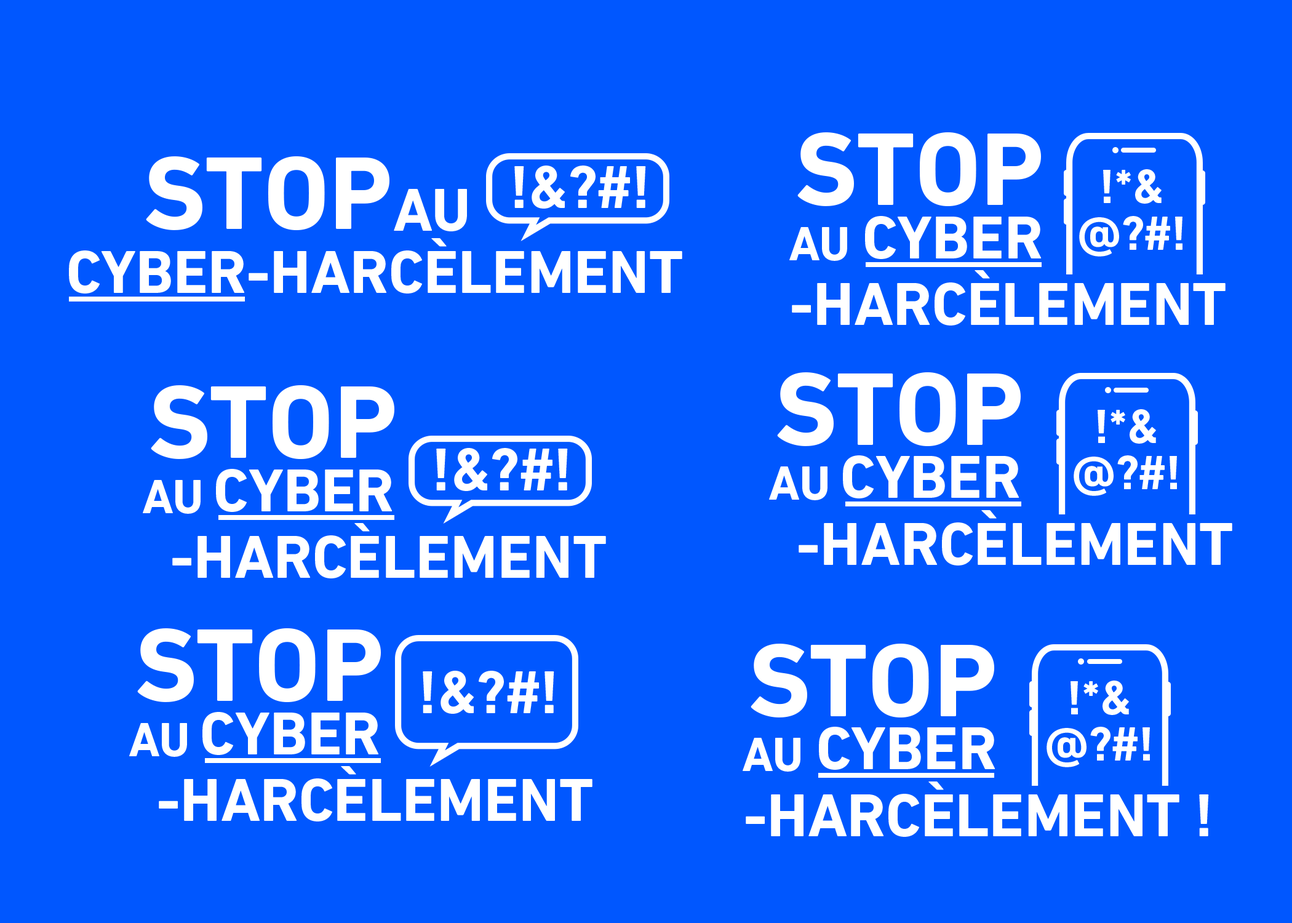
<style>
.page{position:relative;width:1292px;height:923px;background:#0057ff}
.page>*{position:absolute;margin:0}
.t1{font:105.1px "DINNextW1G-Bold";color:#ffffff}
.t2{font:61.5px "DINNextW1G-Bold";color:#ffffff}
.t3{font:48.7px/46.2px "DINNextW1G-Bold";color:#ffffff}
.t4{font:61.5px/66.8px "DINNextW1G-Bold";color:#ffffff}
.t5{font:48.7px "DINNextW1G-Bold";color:#ffffff}
</style>
<div class="page">
<p class="t1" style="left:797px;top:132px;width:244px;height:75px">STOP</p>
<p class="t1" style="left:146px;top:156px;width:243px;height:75px">STOP</p>
<p class="t2" style="left:514px;top:166px;width:132px;height:43px">!&amp;?#!</p>
<p class="t3" style="left:1079px;top:169px;width:104px;height:88px;text-align:center">!*&amp;<br>@?#!</p>
<p class="t2" style="left:394px;top:189px;width:73px;height:42px">AU</p>
<p class="t4" style="left:792px;top:216px;width:434px;height:109px">CYBER<br> -HARCÈLEMENT</p>
<p class="t5" style="left:789px;top:227px;width:58px;height:34px">AU</p>
<p class="t2" style="left:69px;top:238px;width:613px;height:55px">CYBER-HARCÈLEMENT</p>
<p class="t1" style="left:777px;top:372px;width:244px;height:75px">STOP</p>
<p class="t1" style="left:151px;top:385px;width:243px;height:75px">STOP</p>
<p class="t3" style="left:1074px;top:409px;width:103px;height:87px;text-align:center">!*&amp;<br>@?#!</p>
<p class="t2" style="left:436px;top:448px;width:132px;height:43px">!&amp;?#!</p>
<p class="t4" style="left:799px;top:455px;width:433px;height:110px">CYBER<br> -HARCÈLEMENT</p>
<p class="t4" style="left:172px;top:469px;width:434px;height:109px">CYBER<br> -HARCÈLEMENT</p>
<p class="t5" style="left:769px;top:466px;width:59px;height:34px">AU</p>
<p class="t5" style="left:143px;top:480px;width:58px;height:34px">AU</p>
<p class="t1" style="left:137px;top:628px;width:244px;height:75px">STOP</p>
<p class="t1" style="left:751px;top:644px;width:243px;height:74px">STOP</p>
<p class="t2" style="left:423px;top:671px;width:131px;height:43px">!&amp;?#!</p>
<p class="t3" style="left:1047px;top:680px;width:103px;height:87px;text-align:center">!*&amp;<br>@?#!</p>
<p class="t4" style="left:159px;top:712px;width:433px;height:109px">CYBER<br> -HARCÈLEMENT</p>
<p class="t5" style="left:129px;top:723px;width:58px;height:34px">AU</p>
<p class="t5" style="left:743px;top:738px;width:57px;height:34px">AU</p>
<p class="t4" style="left:746px;top:727px;width:463px;height:110px">CYBER<br>-HARCÈLEMENT !</p>
</div>
